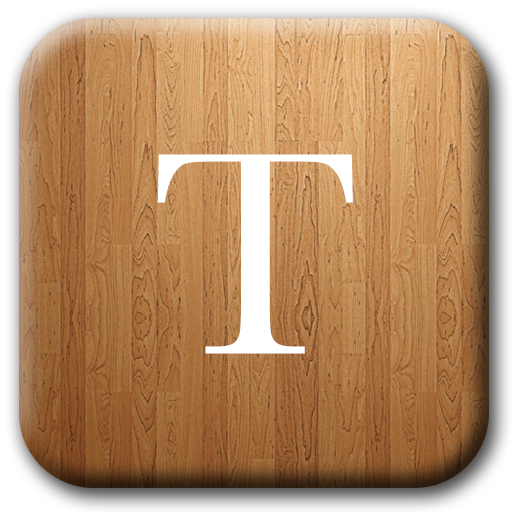
<style>
.page{position:relative;width:512px;height:512px}
.page>*{position:absolute;margin:0}
.t1{font:300px "Baskerville";color:#ffffff}
</style>
<div class="page">
<p class="t1" style="left:157px;top:154px;width:196px;height:200px">T</p>
</div>
